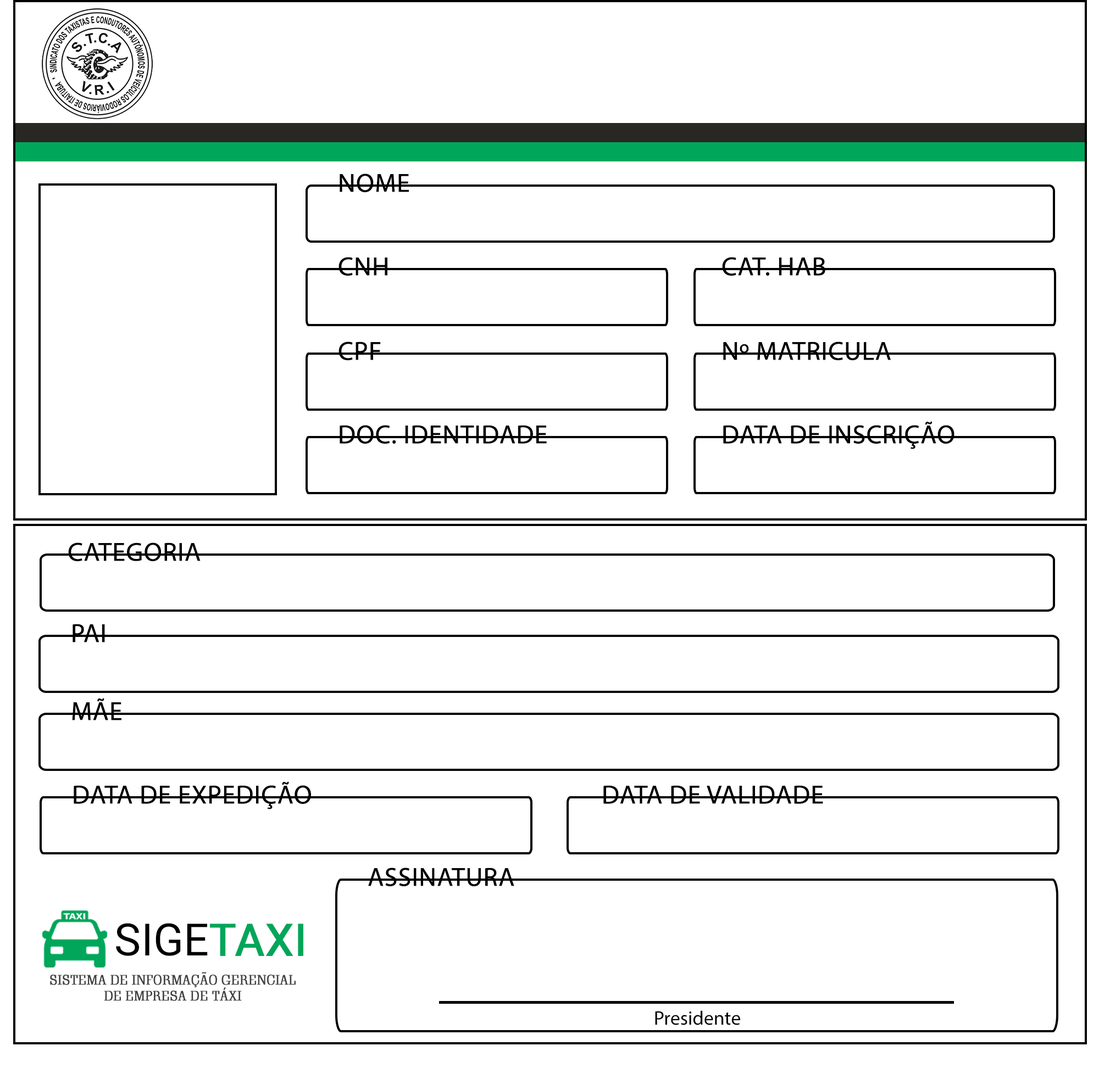
<style>
.page{position:relative;width:1099px;height:1085px;background:#ffffff}
.page>*{position:absolute;margin:0}
.t1{font:26.4px "MyriadPro-Regular";color:#000000;text-transform:uppercase;font-weight:bold}
.t2{font:26.4px "MyriadPro-Regular";color:#000000;font-weight:bold}
.t3{font:44.6px "Roboto-Regular";color:#000000;text-transform:uppercase}
.t4{font:44.6px "Roboto-Regular";color:#00a65a;text-transform:uppercase;font-weight:bold}
.t5{font:13.4px "SchadowBT-Roman";color:#414141;text-transform:uppercase;font-weight:bold}
.t6{font:19.8px "MyriadPro-Regular";color:#000000}
</style>
<div class="page">
<p class="t1" style="left:339px;top:174px;width:70px;height:18px">Nome</p>
<p class="t2" style="left:338px;top:257px;width:49px;height:19px">CNH</p>
<p class="t2" style="left:722px;top:257px;width:103px;height:19px">CAT. HAB</p>
<p class="t2" style="left:338px;top:342px;width:43px;height:18px">CPF</p>
<p class="t1" style="left:723px;top:342px;width:167px;height:18px">nº mATRICULA</p>
<p class="t2" style="left:339px;top:425px;width:208px;height:19px">DOC. IDENTIDADE</p>
<p class="t1" style="left:723px;top:421px;width:231px;height:28px">DATA DE INSCRIÇÃO</p>
<p class="t1" style="left:68px;top:543px;width:132px;height:18px">Categoria</p>
<p class="t1" style="left:73px;top:624px;width:32px;height:19px">PAI</p>
<p class="t1" style="left:72px;top:698px;width:49px;height:23px">mÃE</p>
<p class="t2" style="left:74px;top:782px;width:237px;height:28px">DATA DE EXPEDIÇÃO</p>
<p class="t1" style="left:603px;top:785px;width:220px;height:19px">data de validade</p>
<p class="t1" style="left:368px;top:868px;width:146px;height:19px">Assinatura</p>
<p class="t3" style="left:116px;top:923px;width:187px;height:33px">Sige<span class="t4">Taxi</span></p>
<p class="t5" style="left:50px;top:972px;width:246px;height:29px;text-align:center">Sistema de informação gerencial<br>de empresa de táxi</p>
<p class="t6" style="left:655px;top:1011px;width:85px;height:15px"><span class="t2"><br></span>Presidente</p>
</div>
